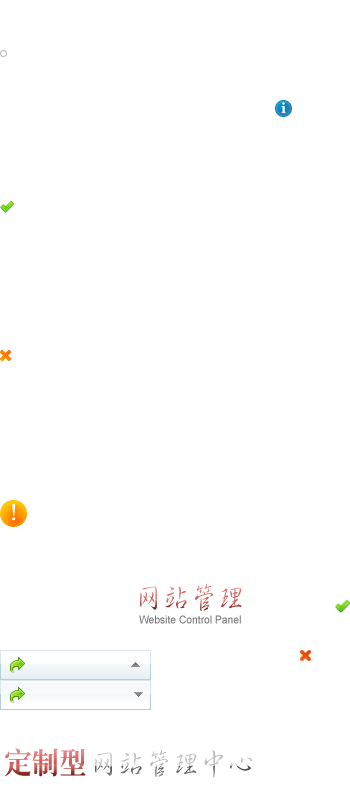
<style>
.page{position:relative;width:350px;height:800px;background:#ffffff}
.page>*{position:absolute;margin:0}
.t1{font:29.3px "GBHerSin-Medium";scale:0.94 1}
.t2{font:11px "ArialMT";color:#757575;scale:0.94 1}
.t3{font:29.3px "CTLaoSongSJ";scale:0.94 1}
</style>
<div class="page">
<p class="t1" style="left:140px;top:583px;width:102px;height:28px">网站管理</p>
<p class="t2" style="left:139px;top:615px;width:102px;height:9px">Website Control Panel</p>
<p class="t3" style="left:4px;top:748px;width:82px;height:29px">定制型</p>
<p class="t1" style="left:95px;top:749px;width:158px;height:29px">网站管理中心</p>
</div>
